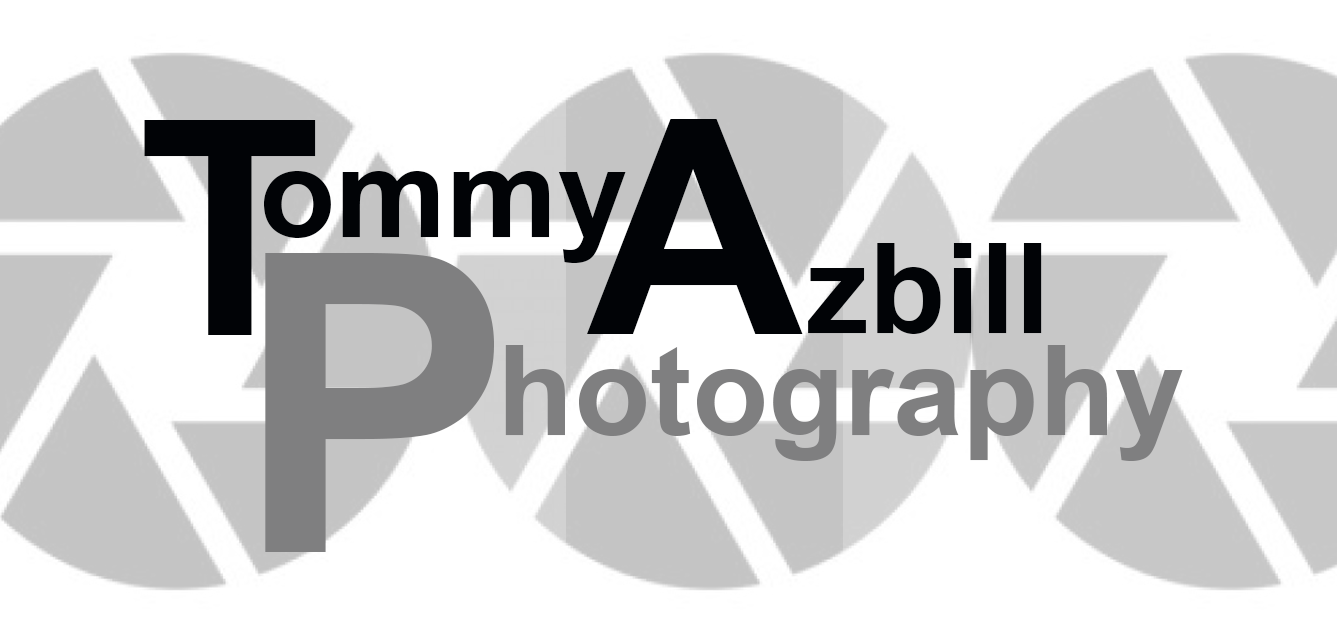
<style>
.page{position:relative;width:1337px;height:644px;background:#ffffff}
.page>*{position:absolute;margin:0}
.t1{font:300px "Arial-BoldMT";color:#010306}
.t2{font:125px "Arial-BoldMT";color:#010306}
.t3{font:416.7px "Arial-BoldMT";color:#7f7f80}
.t4{font:125px "Arial-BoldMT";color:#7f7f80}
</style>
<div class="page">
<p class="t1" style="left:144px;top:120px;width:172px;height:215px">T</p>
<p class="t1" style="left:587px;top:119px;width:216px;height:215px">A</p>
<p class="t2" style="left:264px;top:171px;width:362px;height:92px">ommy</p>
<p class="t2" style="left:808px;top:243px;width:234px;height:91px">zbill</p>
<p class="t3" style="left:265px;top:253px;width:229px;height:299px">P</p>
<p class="t4" style="left:505px;top:345px;width:678px;height:116px">hotography</p>
</div>
